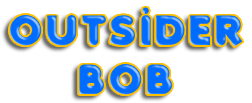
<style>
.page{position:relative;width:252px;height:103px;background:#ffffff}
.page>*{position:absolute;margin:0}
.t1{font:41px "Folks-Heavy";letter-spacing:0.1em;color:#006cff}
</style>
<div class="page">
<p class="t1" style="left:9px;top:7px;width:234px;height:88px;text-align:center">OUTSIDER<br>BOB</p>
</div>
